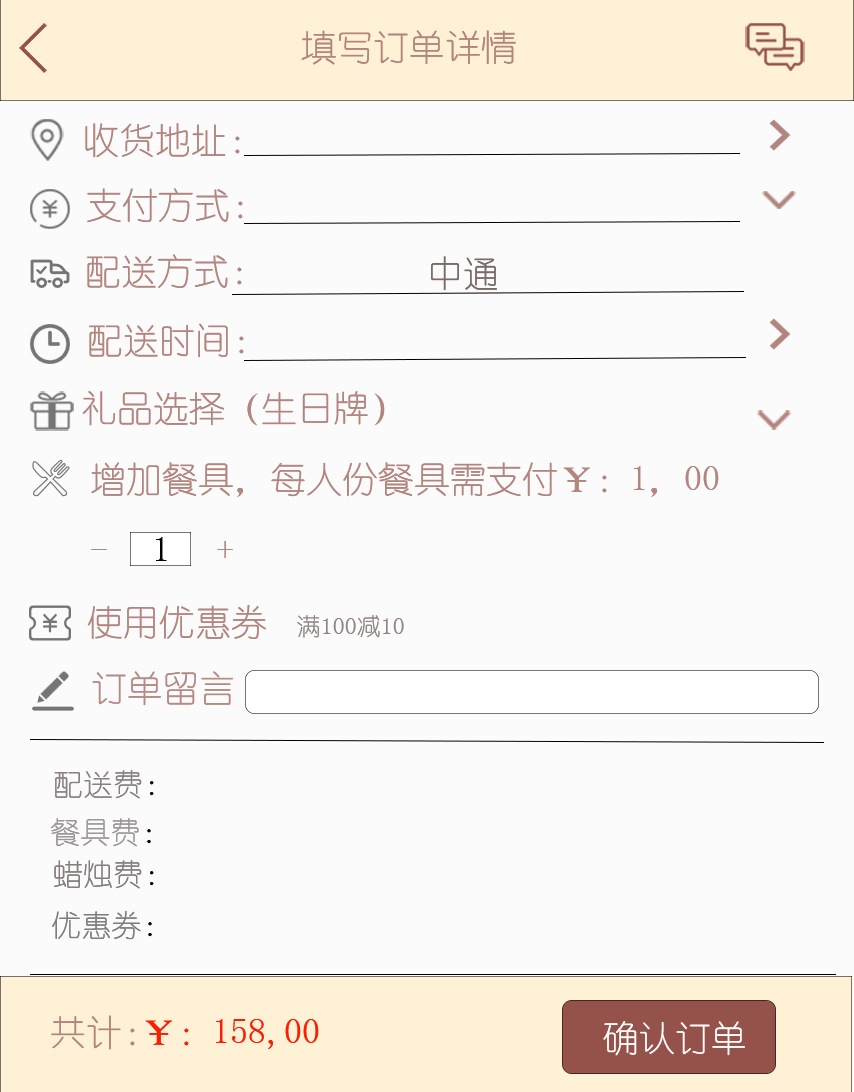
<style>
.page{position:relative;width:854px;height:1092px;background:#fcfbfb}
.page>*{position:absolute;margin:0}
.t1{font:36px "YouYuan";color:#b3857f}
.t2{font:36px "YouYuan";color:#7b6c6a}
.t3{font:36px "YouYuan";color:#020202}
.t4{font:24px "YouYuan";color:#918584}
.t5{font:36px "YouYuan";color:#b78b85}
.t6{font:30px "YouYuan";color:#878281}
.t7{font:30px "YouYuan";color:#070707}
.t8{font:30px "YouYuan";color:#9d9897}
.t9{font:30px "YouYuan";color:#847e7d}
.t10{font:30px "YouYuan";color:#7f7c7c}
.t11{font:36px "YouYuan";color:#fb1e01}
.t12{font:36px "YouYuan";color:#fcfbfa}
</style>
<div class="page">
<p class="t1" style="left:301px;top:30px;width:215px;height:35px">填写订单详情</p>
<p class="t1" style="left:85px;top:123px;width:155px;height:35px">收货地址：</p>
<p class="t1" style="left:87px;top:188px;width:156px;height:35px">支付方式：</p>
<p class="t1" style="left:87px;top:254px;width:155px;height:34px">配送方式：</p>
<p class="t2" style="left:431px;top:256px;width:66px;height:35px">中通</p>
<p class="t1" style="left:89px;top:323px;width:155px;height:35px">配送时间：</p>
<p class="t1" style="left:82px;top:391px;width:303px;height:35px">礼品选择（生日牌）</p>
<p class="t1" style="left:91px;top:462px;width:628px;height:36px">增加餐具，每人份餐具需支付￥：1，00</p>
<p class="t3" style="left:156px;top:537px;width:11px;height:24px">1</p>
<p class="t1" style="left:87px;top:604px;width:179px;height:35px">使用优惠券</p>
<p class="t4" style="left:297px;top:615px;width:107px;height:23px">满100减10</p>
<p class="t5" style="left:92px;top:671px;width:141px;height:35px">订单留言</p>
<p class="t6" style="left:54px;top:769px;width:100px;height:30px">配送费<span class="t7">：</span></p>
<p class="t8" style="left:50px;top:817px;width:101px;height:30px">餐具费<span class="t7">：</span></p>
<p class="t9" style="left:54px;top:859px;width:100px;height:30px">蜡烛费<span class="t7">：</span></p>
<p class="t10" style="left:52px;top:910px;width:100px;height:30px">优惠券<span class="t7">：</span></p>
<p class="t1" style="left:51px;top:1015px;width:84px;height:35px">共计：</p>
<p class="t11" style="left:145px;top:1019px;width:174px;height:30px">￥：158,00</p>
<p class="t12" style="left:603px;top:1021px;width:142px;height:35px">确认订单</p>
</div>
